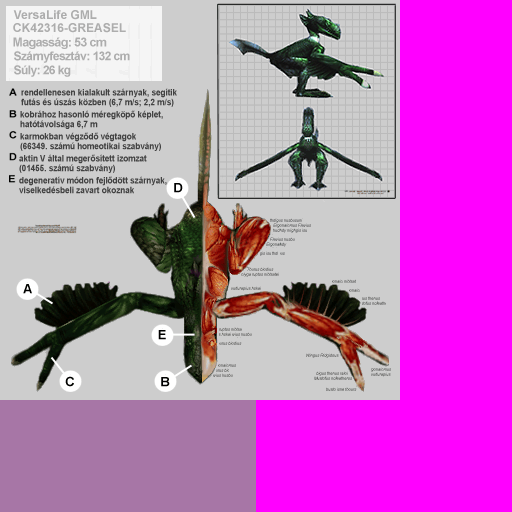
<style>
.page{position:relative;width:512px;height:512px;background:#cdcdcd}
.page>*{position:absolute;margin:0}
.t1{font:11.9px "Arial-BoldMT";letter-spacing:-0.005em;color:#adadad}
.t2{font:12.4px "Arial-BoldMT";letter-spacing:-0.05em;color:#adadad}
.t3{font:12.1px "Arial-BoldMT";letter-spacing:-0.05em;color:#adadad}
.t4{font:8.9px/9.6px "Arial-BoldMT";letter-spacing:-0.005em;color:#424242;scale:0.92 1}
</style>
<div class="page">
<p class="t1" style="left:90px;top:10px;width:7px;height:9px">L</p>
<p class="t2" style="left:13px;top:37px;width:94px;height:12px">Magasság: 53 cm</p>
<p class="t3" style="left:14px;top:51px;width:116px;height:12px">Szárnyfesztáv: 132 cm</p>
<p class="t3" style="left:14px;top:65px;width:57px;height:12px">Súly: 26 kg</p>
<p class="t4" style="left:21px;top:88px;width:156px;height:19px">rendellenesen kialakult szárnyak, segítik<br>futás és úszás közben (6,7 m/s; 2,2 m/s)</p>
<p class="t4" style="left:20px;top:110px;width:143px;height:19px">kobrához hasonló méregköpő képlet,<br>hatótávolsága 6,7 m</p>
<p class="t4" style="left:20px;top:132px;width:141px;height:19px">karmokban végződő végtagok<br>(66349. számú homeotikai szabvány)</p>
<p class="t4" style="left:19px;top:154px;width:128px;height:19px">aktin V által megerősített izomzat<br>(01455. számú szabvány)</p>
<p class="t4" style="left:19px;top:176px;width:148px;height:18px">degeneratív módon fejlődött szárnyak,<br>viselkedésbeli zavart okoznak</p>
</div>
